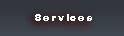
<style>
.page{position:relative;width:124px;height:36px;background:#33363d}
.page>*{position:absolute;margin:0}
.t1{font:10px "HeliosBlack";letter-spacing:0.14em;color:#ffffff}
</style>
<div class="page">
<p class="t1" style="left:35px;top:14px;width:57px;height:7px">Services</p>
</div>
